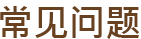
<style>
.page{position:relative;width:141px;height:39px;background:#ffffff}
.page>*{position:absolute;margin:0}
.t1{font:36px "MicrosoftJhengHeiBold";color:#684121}
</style>
<div class="page">
<p class="t1" style="left:0px;top:6px;width:139px;height:33px">常见问题</p>
</div>
